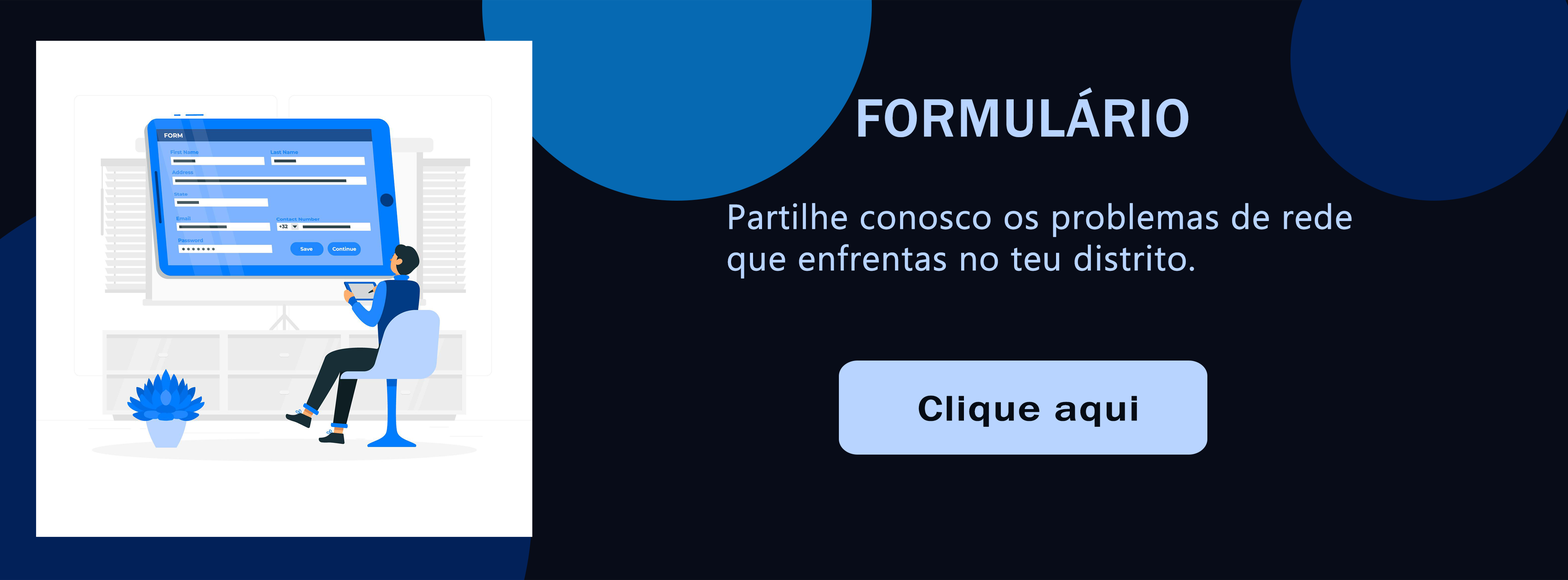
<style>
.page{position:relative;width:1568px;height:580px;background:#080c18}
.page>*{position:absolute;margin:0}
.t1{font:55.3px "FranklinGothic-Medium";color:#b8d4ff;font-weight:bold}
.t2{font:34.6px "Gadugi";color:#b8d4ff;font-weight:bold}
.t3{font:36.5px "FranklinGothic-Medium";color:#060c15;font-weight:bold;scale:1.2 1}
</style>
<div class="page">
<p class="t1" style="left:858px;top:87px;width:331px;height:50px">FORMULÁRIO</p>
<p class="t2" style="left:728px;top:203px;width:624px;height:76px">Partilhe conosco os problemas de rede <br>que enfrentas no teu distrito.</p>
<p class="t3" style="left:918px;top:396px;width:219px;height:31px">Clique aqui</p>
</div>
